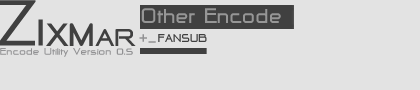
<style>
.page{position:relative;width:420px;height:90px;background:#e3e3e3}
.page>*{position:absolute;margin:0}
.t1{font:26.1px "-@-D-RCW2550v.2.00-";color:#969696}
.t2{font:40px "-@-D-RCW2550v.2.00-";color:#404040;scale:1.11 1}
.t3{font:30px "-@-D-RCW2550v.2.00-";color:#404040;scale:1.11 1}
.t4{font:18px "-@-D-RCW2550v.2.00-";color:#919193}
.t5{font:14px "-@-D-RCW2550v.2.00-";color:#404040}
.t6{font:12px "-@-D-RCW2550v.2.00-";color:#919193;scale:1.11 1}
.t7{font:12px "-@-D-RCW2550v.2.00-";color:#ffffff;scale:1.11 1}
</style>
<div class="page">
<p class="t1" style="left:141px;top:8px;width:140px;height:15px">Other Encode</p>
<p class="t2" style="left:46px;top:23px;width:90px;height:23px">XM<span class="t3">AR</span></p>
<p class="t4" style="left:139px;top:34px;width:17px;height:9px">+_</p>
<p class="t5" style="left:158px;top:34px;width:49px;height:8px">FANSUB</p>
<p class="t6" style="left:0px;top:48px;width:133px;height:9px"><span class="t7"><br></span>Encode Utility Version 0.5</p>
</div>
